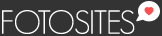
<style>
.page{position:relative;width:162px;height:36px;background:#333333}
.page>*{position:absolute;margin:0}
.t1{font:32.8px "GeosansLight";color:#ffffff;text-transform:uppercase}
</style>
<div class="page">
<p class="t1" style="left:2px;top:10px;width:133px;height:24px">fotosites</p>
</div>
